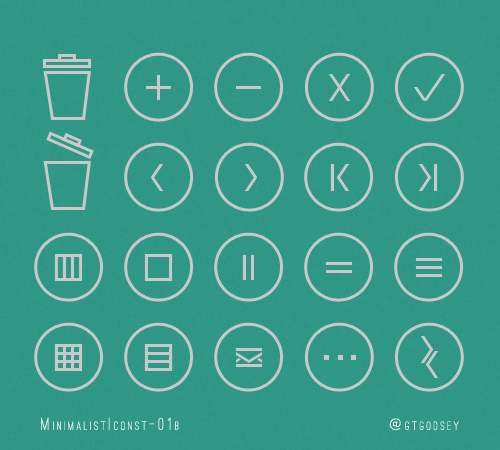
<style>
.page{position:relative;width:500px;height:450px}
.page>*{position:absolute;margin:0}
.t1{font:18px "OstrichSans-Medium";letter-spacing:0.2em;color:#ffffff;font-variant:small-caps}
.t2{font:18px "OstrichSans-Medium";letter-spacing:0.2em;color:#f3f9f8;font-variant:small-caps}
</style>
<div class="page">
<p class="t1" style="left:41px;top:417px;width:138px;height:13px">MinimalistIconst-01b</p>
<p class="t2" style="left:389px;top:418px;width:70px;height:12px">@gtgodsey</p>
</div>
